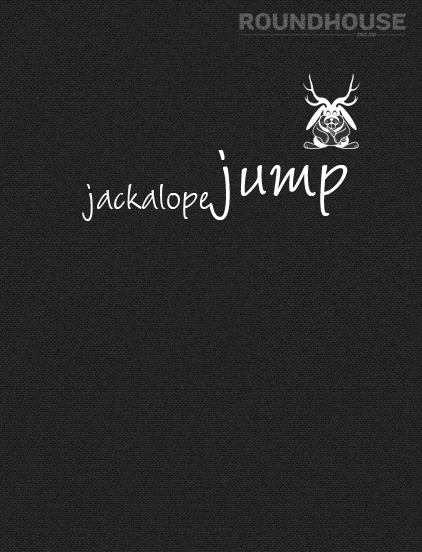
<style>
.page{position:relative;width:422px;height:552px}
.page>*{position:absolute;margin:0}
.t1{font:111px "BarbaraHand";color:#ffffff}
.t2{font:58px "BarbaraHand";color:#ffffff}
</style>
<div class="page">
<p class="t1" style="left:209px;top:150px;width:139px;height:70px">jump</p>
<p class="t2" style="left:82px;top:184px;width:130px;height:37px">jackalope</p>
</div>
